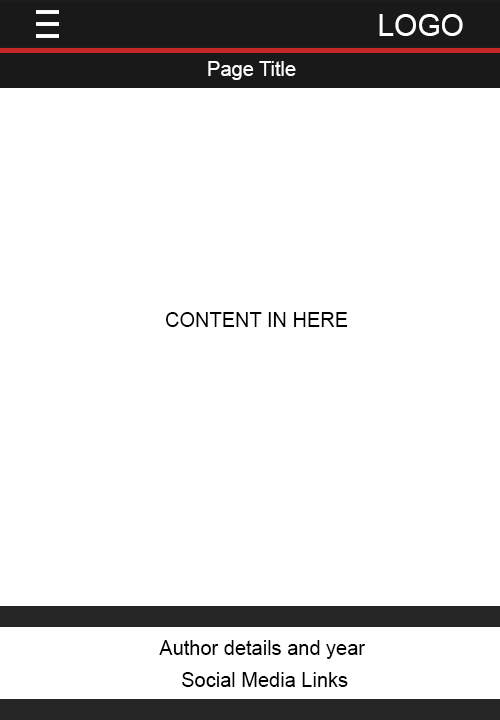
<style>
.page{position:relative;width:500px;height:720px;background:#ffffff}
.page>*{position:absolute;margin:0}
.t1{font:30px "ArialMT";color:#ffffff}
.t2{font:20px "ArialMT";color:#ffffff}
.t3{font:20px "ArialMT";color:#000000}
</style>
<div class="page">
<p class="t1" style="left:379px;top:14px;width:84px;height:22px">LOGO</p>
<p class="t2" style="left:208px;top:61px;width:88px;height:19px">Page Title</p>
<p class="t3" style="left:165px;top:312px;width:183px;height:15px">CONTENT IN HERE</p>
<p class="t3" style="left:159px;top:640px;width:206px;height:19px">Author details and year</p>
<p class="t3" style="left:182px;top:672px;width:166px;height:15px">Social Media Links</p>
</div>
